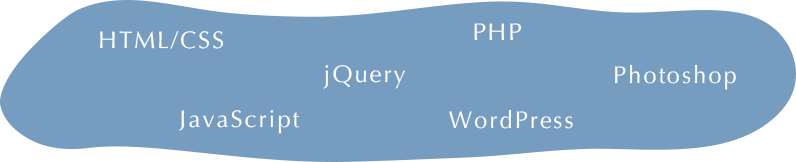
<style>
.page{position:relative;width:796px;height:162px;background:#769cbf}
.page>*{position:absolute;margin:0}
.t1{font:24px "Optima-Regular";letter-spacing:0.08em;color:#ffffff}
</style>
<div class="page">
<p class="t1" style="left:474px;top:23px;width:48px;height:18px">PHP</p>
<p class="t1" style="left:100px;top:31px;width:124px;height:18px">HTML/CSS</p>
<p class="t1" style="left:323px;top:65px;width:82px;height:24px">jQuery</p>
<p class="t1" style="left:615px;top:64px;width:121px;height:26px">Photoshop</p>
<p class="t1" style="left:179px;top:110px;width:121px;height:24px">JavaScript</p>
<p class="t1" style="left:449px;top:109px;width:124px;height:20px">WordPress</p>
</div>
